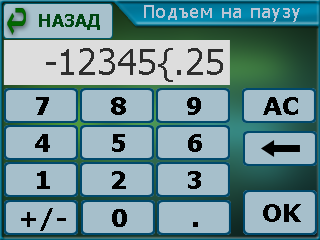
<style>
.page{position:relative;width:320px;height:240px;background:#a6bfcb}
.page>*{position:absolute;margin:0}
.t1{font:18px "Tahoma";letter-spacing:0.075em;color:#bac5d5}
.t2{font:18px "Tahoma-Bold";color:#004612}
.t3{font:36px "Tahoma";color:#2e2e2e}
.t4{font:24px "Verdana-Bold";color:#000000}
</style>
<div class="page">
<p class="t1" style="left:144px;top:5px;width:156px;height:17px">Подъем на паузу</p>
<p class="t2" style="left:39px;top:14px;width:61px;height:16px">НАЗАД</p>
<p class="t3" style="left:46px;top:48px;width:177px;height:34px">-12345{.25</p>
<p class="t4" style="left:36px;top:97px;width:13px;height:18px">7</p>
<p class="t4" style="left:111px;top:97px;width:15px;height:18px">8</p>
<p class="t4" style="left:187px;top:97px;width:14px;height:18px">9</p>
<p class="t4" style="left:263px;top:97px;width:35px;height:18px">AC</p>
<p class="t4" style="left:35px;top:134px;width:15px;height:18px">4</p>
<p class="t4" style="left:112px;top:134px;width:13px;height:18px">5</p>
<p class="t4" style="left:188px;top:134px;width:14px;height:18px">6</p>
<p class="t4" style="left:37px;top:171px;width:13px;height:18px">1</p>
<p class="t4" style="left:112px;top:171px;width:14px;height:18px">2</p>
<p class="t4" style="left:188px;top:171px;width:13px;height:18px">3</p>
<p class="t4" style="left:21px;top:208px;width:45px;height:23px">+/-</p>
<p class="t4" style="left:112px;top:209px;width:15px;height:18px">0</p>
<p class="t4" style="left:263px;top:204px;width:38px;height:18px">OK</p>
</div>
